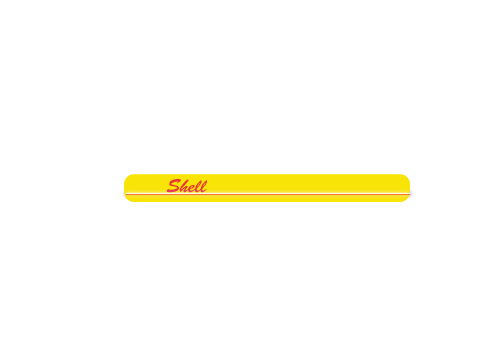
<style>
.page{position:relative;width:504px;height:360px;background:#ffffff}
.page>*{position:absolute;margin:0}
.t1{font:19px "BrushScriptStd";color:#e73536}
</style>
<div class="page">
<p class="t1" style="left:166px;top:179px;width:41px;height:14px">Shell</p>
</div>
